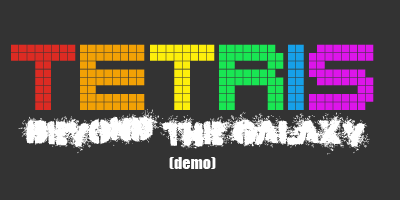
<style>
.page{position:relative;width:400px;height:200px;background:#333333}
.page>*{position:absolute;margin:0}
.t1{font:65.8px "Block-Stock";color:#dc2b23}
.t2{font:65.8px "Block-Stock";color:#f2a105}
.t3{font:65.8px "Block-Stock";color:#fdef0b}
.t4{font:65.8px "Block-Stock";color:#19e653}
.t5{font:65.8px "Block-Stock";color:#16a0e8}
.t6{font:65.8px "Block-Stock";color:#dd15ea}
.t7{font:33.7px "Misdemeanor";color:#ffffff}
.t8{font:15.5px "Impact";color:#ffffff;scale:1.03 1}
</style>
<div class="page">
<p class="t1" style="left:11px;top:44px;width:363px;height:66px">T<span class="t2">E</span><span class="t3">T</span><span class="t4">R</span><span class="t5">I</span><span class="t6">S</span></p>
<p class="t7" style="left:18px;top:109px;width:352px;height:46px">beyond the galaxy</p>
<p class="t8" style="left:169px;top:157px;width:47px;height:12px">(demo)</p>
</div>
